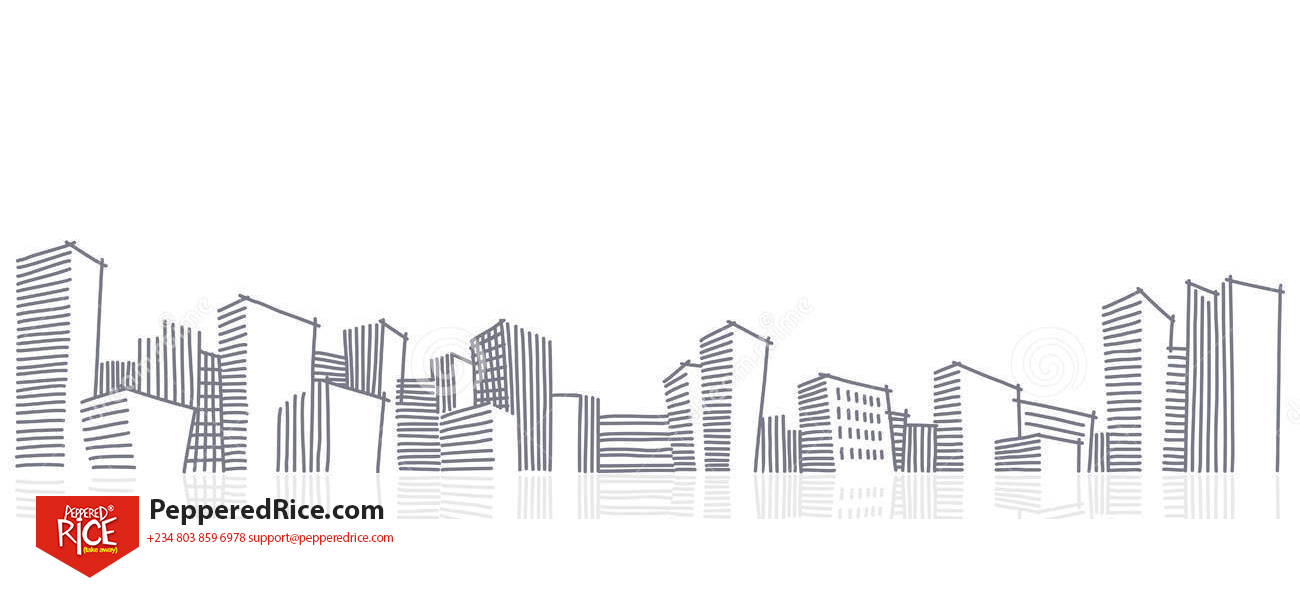
<style>
.page{position:relative;width:1300px;height:610px;background:#ffffff}
.page>*{position:absolute;margin:0}
.t1{font:28.5px "MyriadPro-Bold";color:#242323}
.t2{font:12.9px "MyriadPro-Regular";color:#dc2517;scale:0.97 1}
</style>
<div class="page">
<p class="t1" style="left:151px;top:498px;width:233px;height:27px">PepperedRice.com</p>
<p class="t2" style="left:147px;top:532px;width:246px;height:13px">+234 803 859 6978 support@pepperedrice.com</p>
</div>
